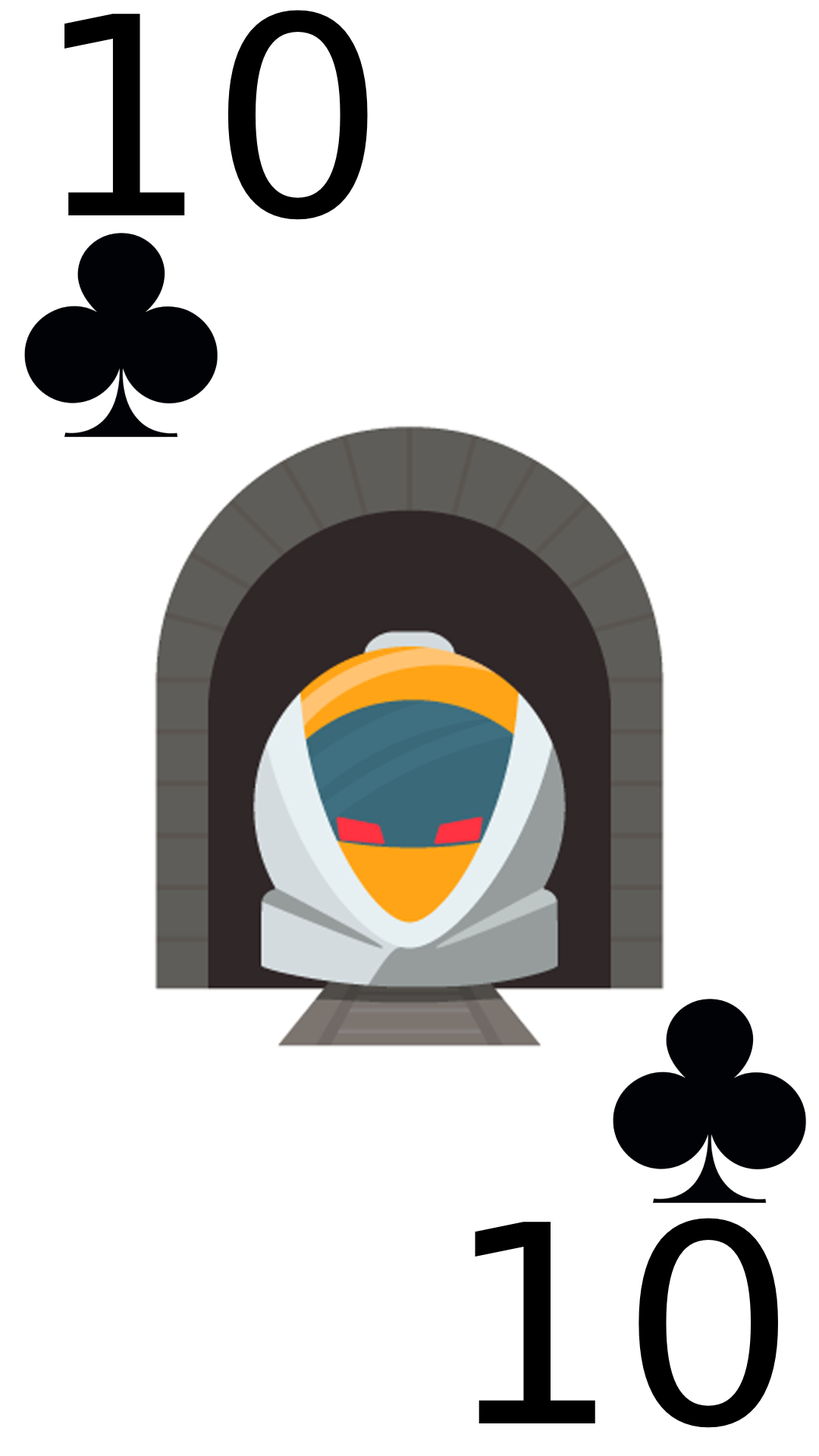
<style>
.page{position:relative;width:819px;height:1456px;background:#ffffff}
.page>*{position:absolute;margin:0}
.t1{font:276.3px "DejaVuSans";color:#000000}
</style>
<div class="page">
<p class="t1" style="left:64px;top:10px;width:304px;height:210px">10</p>
<p class="t1" style="left:475px;top:1218px;width:304px;height:210px">10</p>
</div>
